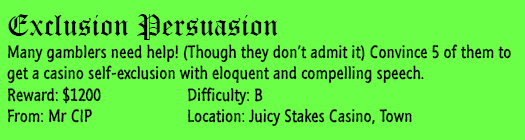
<style>
.page{position:relative;width:525px;height:140px;background:#6cff47}
.page>*{position:absolute;margin:0}
.t1{font:18px "SegoeMarker";color:#000000}
.t2{font:30px "OldEnglishTextMT";color:#000000}
</style>
<div class="page">
<p class="t1" style="left:7px;top:14px;width:504px;height:112px"><span class="t2">Exclusion Persuasion<br></span>Many gamblers need help! (Though they don’t admit it) Convince 5 of them to<br>get a casino self-exclusion with eloquent and compelling speech.<br>Reward: $1200   Difficulty: B<br>From: Mr CIP   Location: Juicy Stakes Casino, Town</p>
</div>
